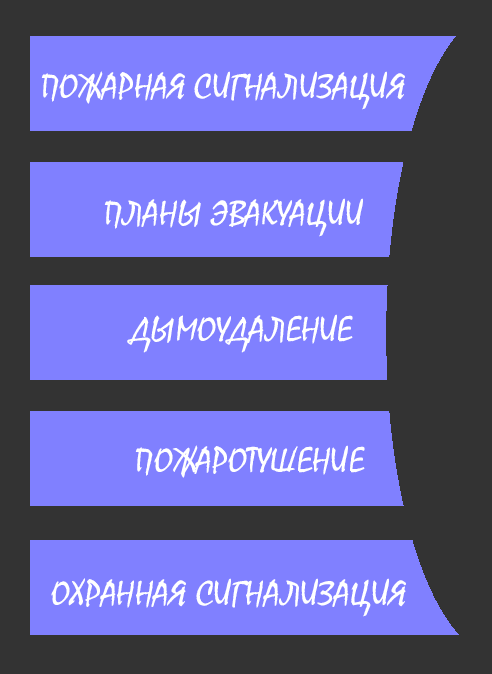
<style>
.page{position:relative;width:492px;height:674px;background:#8080ff}
.page>*{position:absolute;margin:0}
.t1{font:36px "Mistral";color:#ffffff}
</style>
<div class="page">
<p class="t1" style="left:41px;top:71px;width:364px;height:39px">ПОЖАРНАЯ СИГНАЛИЗАЦИЯ</p>
<p class="t1" style="left:104px;top:198px;width:259px;height:39px">ПЛАНЫ ЭВАКУАЦИИ</p>
<p class="t1" style="left:127px;top:314px;width:226px;height:39px">ДЫМОУДАЛЕНИЕ</p>
<p class="t1" style="left:135px;top:445px;width:230px;height:33px">ПОЖАРОТУШЕНИЕ</p>
<p class="t1" style="left:51px;top:578px;width:355px;height:39px">ОХРАННАЯ СИГНАЛИЗАЦИЯ</p>
</div>
